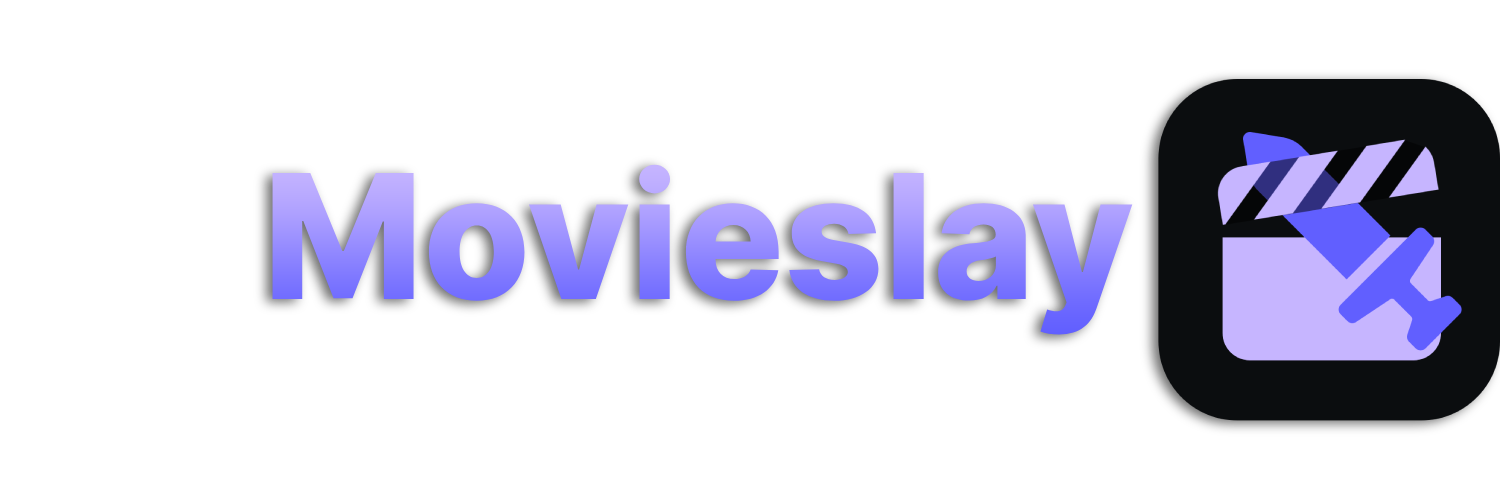
<style>
.page{position:relative;width:1500px;height:500px;background:#ffffff}
.page>*{position:absolute;margin:0}
.t1{font:173.4px "Inter-ExtraBold"}
</style>
<div class="page">
<p class="t1" style="left:272px;top:164px;width:861px;height:171px">Movieslay</p>
</div>
